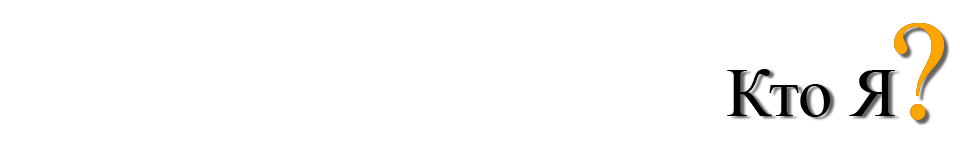
<style>
.page{position:relative;width:960px;height:141px;background:#ffffff}
.page>*{position:absolute;margin:0}
.t1{font:138.6px "TimesNewRomanPSMT";color:#ffa500}
.t2{font:69px "TimesNewRomanPSMT";color:#000000}
</style>
<div class="page">
<p class="t1" style="left:894px;top:23px;width:51px;height:97px">?</p>
<p class="t1" style="left:894px;top:23px;width:51px;height:97px">?</p>
<p class="t2" style="left:727px;top:69px;width:168px;height:48px">Кто Я</p>
</div>
